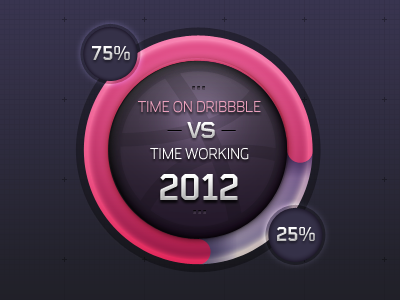
<style>
.page{position:relative;width:400px;height:300px}
.page>*{position:absolute;margin:0}
.t1{font:20.8px "FoundryGridnik-Bold";letter-spacing:-0.08em}
.t2{font:22px "FoundryGridnik-Bold";letter-spacing:-0.08em;color:#564a5c}
.t3{font:15px "Stainless-Light";letter-spacing:-0.02em;color:#eba1bd}
.t4{font:24px "FoundryGridnik-Bold";letter-spacing:-0.08em}
.t5{font:15px "Stainless-Light";letter-spacing:-0.02em;color:#ffffff}
.t6{font:39px "FoundryGridnik-Bold";letter-spacing:-0.08em}
.t7{font:39px "FoundryGridnik-Bold";letter-spacing:-0.12em}
.t8{font:22px "FoundryGridnik-Bold";letter-spacing:-0.08em;color:#3e3244}
</style>
<div class="page">
<p class="t1" style="left:92px;top:46px;width:38px;height:14px">75%</p>
<p class="t2" style="left:192px;top:87px;width:13px;height:3px">...</p>
<p class="t3" style="left:138px;top:101px;width:123px;height:12px">TIME ON DRIBBBLE</p>
<p class="t4" style="left:187px;top:122px;width:28px;height:16px">VS</p>
<p class="t5" style="left:150px;top:148px;width:99px;height:12px">TIME WORKING</p>
<p class="t6" style="left:160px;top:174px;width:78px;height:26px">20<span class="t7">12</span></p>
<p class="t8" style="left:193px;top:211px;width:13px;height:3px">...</p>
<p class="t1" style="left:277px;top:227px;width:38px;height:14px">25%</p>
</div>
